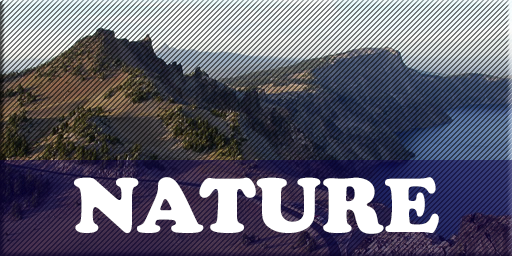
<style>
.page{position:relative;width:512px;height:256px}
.page>*{position:absolute;margin:0}
.t1{font:80px "CooperBlack";color:#ffffff}
</style>
<div class="page">
<p class="t1" style="left:74px;top:177px;width:365px;height:57px">NATURE</p>
</div>
